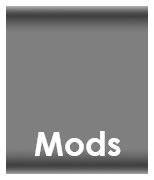
<style>
.page{position:relative;width:154px;height:180px;background:#7f7f7f}
.page>*{position:absolute;margin:0}
.t1{font:33.3px "CenturyGothic-Bold";color:#ffffff}
</style>
<div class="page">
<p class="t1" style="left:34px;top:131px;width:87px;height:25px">Mods</p>
</div>
